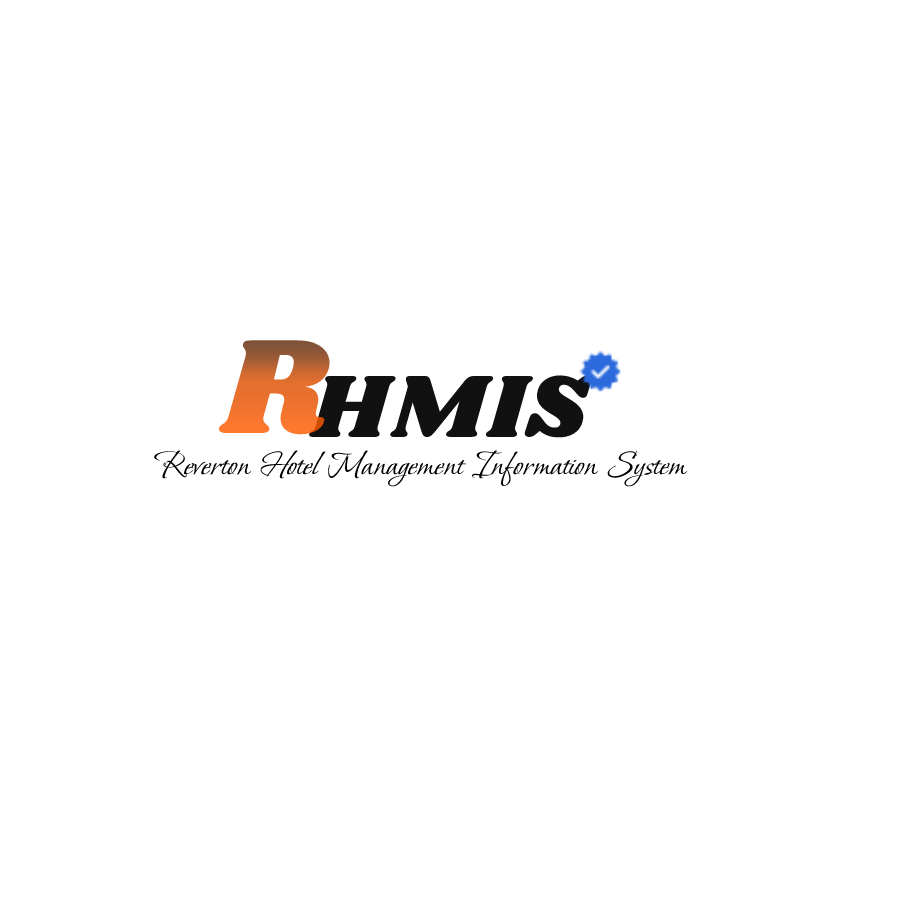
<style>
.page{position:relative;width:900px;height:900px;background:#ffffff}
.page>*{position:absolute;margin:0}
.t1{font:139.1px "Shrikhand-Regular"}
.t2{font:91.6px "Shrikhand-Regular";color:#111111}
.t3{font:37px "BonheurRoyale-Regular";color:#000000}
</style>
<div class="page">
<p class="t1" style="left:219px;top:340px;width:111px;height:95px">R</p>
<p class="t2" style="left:308px;top:375px;width:285px;height:63px">HMIS</p>
<p class="t3" style="left:154px;top:450px;width:534px;height:37px">Reverton Hotel Management Information System</p>
</div>
